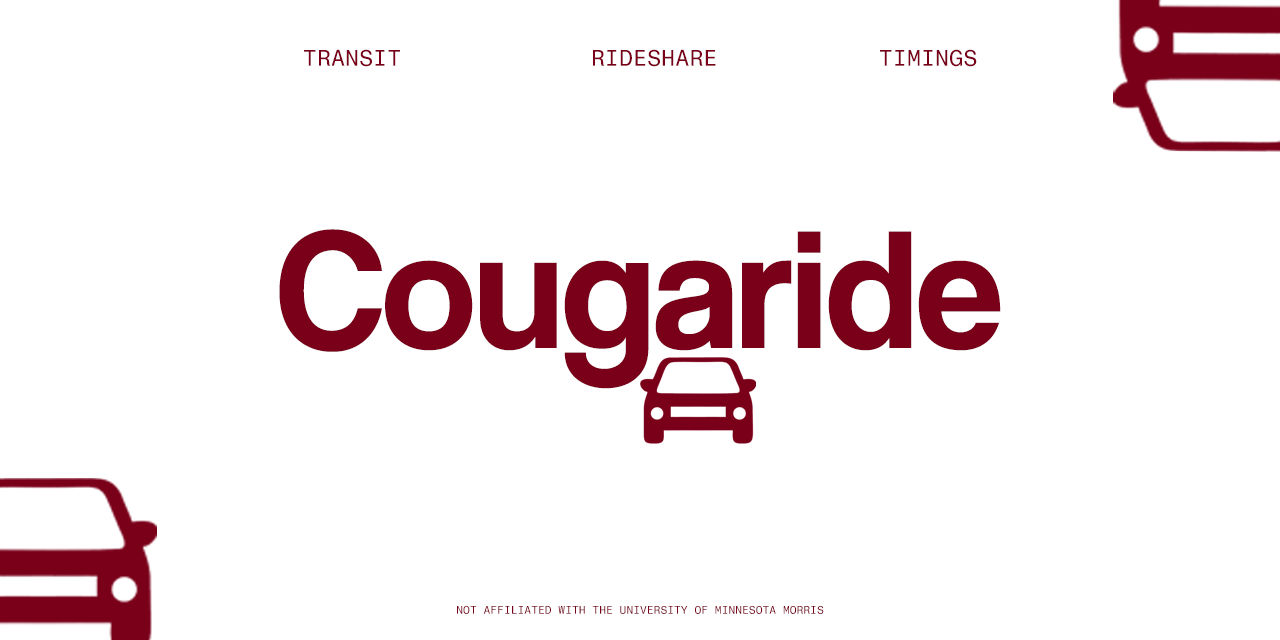
<style>
.page{position:relative;width:1280px;height:640px;background:#ffffff}
.page>*{position:absolute;margin:0}
.t1{font:22.8px "FragmentMono-Regular";color:#7a0019}
.t2{font:172.7px "CoolveticaRg-Regular";color:#7a0019}
.t3{font:11px "FragmentMono-Regular";color:#7a0019}
</style>
<div class="page">
<p class="t1" style="left:304px;top:49px;width:673px;height:18px">TRANSIT      RIDESHARE     TIMINGS</p>
<p class="t2" style="left:279px;top:229px;width:722px;height:160px">Cougaride</p>
<p class="t3" style="left:457px;top:605px;width:367px;height:9px">NOT AFFILIATED WITH THE UNIVERSITY OF MINNESOTA MORRIS</p>
</div>
